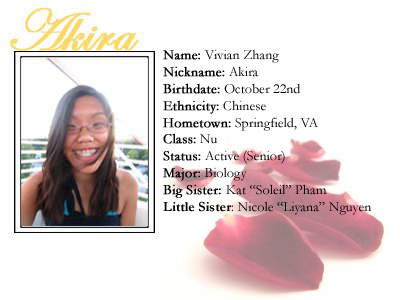
<style>
.page{position:relative;width:400px;height:300px;background:#ffffff}
.page>*{position:absolute;margin:0}
.t1{font:14px "Garamond";color:#000000}
.t2{font:14px "Garamond";color:#000000;font-weight:bold}
.t3{font:14px "Garamond-Bold";color:#000000}
</style>
<div class="page">
<p class="t1" style="left:163px;top:49px;width:209px;height:166px"><span class="t2">Name:</span> Vivian Zhang<br><span class="t2">Nickname:</span> Akira<br><span class="t2">Birthdate:</span> October 22nd<br><span class="t2">Ethnicity:</span> Chinese<br><span class="t2">Hometown:</span> Springfield, VA<br><span class="t2">Class:</span> Nu<br><span class="t2">Status:</span> Active (Senior)<br><span class="t2">Major:</span> Biology<br><span class="t2">Big Sister: </span>Kat “Soleil” Pham<br><span class="t3">Little Sister</span>: Nicole “Liyana” Nguyen</p>
</div>
